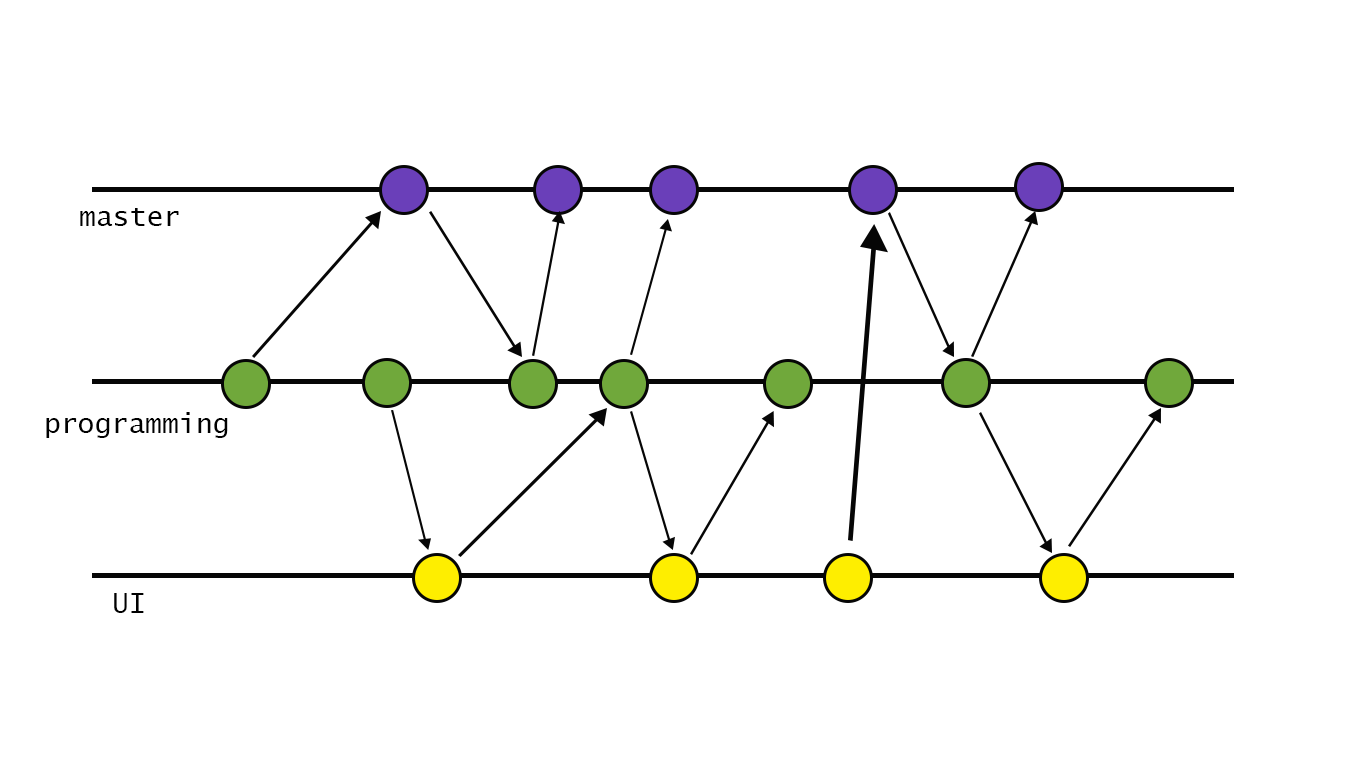
<style>
.page{position:relative;width:1366px;height:768px;background:#ffffff}
.page>*{position:absolute;margin:0}
.t1{font:28px "LucidaSans-Typewriter";color:#000000}
</style>
<div class="page">
<p class="t1" style="left:80px;top:208px;width:99px;height:18px">master</p>
<p class="t1" style="left:46px;top:412px;width:182px;height:26px">programming</p>
<p class="t1" style="left:114px;top:593px;width:30px;height:20px">UI</p>
</div>
